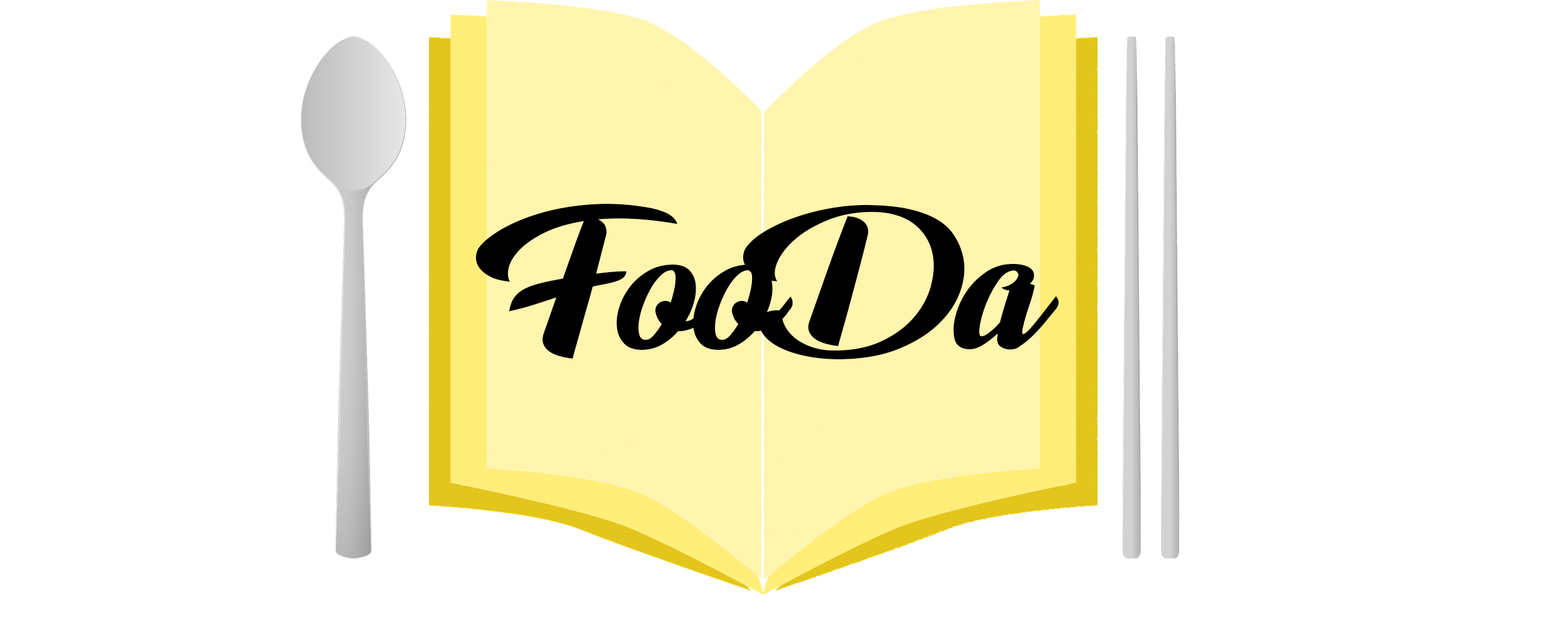
<style>
.page{position:relative;width:1568px;height:627px;background:#ffffff}
.page>*{position:absolute;margin:0}
.t1{font:287.5px "LemonJellyPersonalUse";letter-spacing:-0.04em;color:#000000}
</style>
<div class="page">
<p class="t1" style="left:475px;top:204px;width:584px;height:155px">FooDa</p>
</div>
